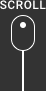
<style>
.page{position:relative;width:46px;height:91px;background:#333333}
.page>*{position:absolute;margin:0}
.t1{font:12px "Roboto-Medium";letter-spacing:0.04em;color:#ffffff}
</style>
<div class="page">
<p class="t1" style="left:0px;top:0px;width:46px;height:10px">SCROLL</p>
</div>
